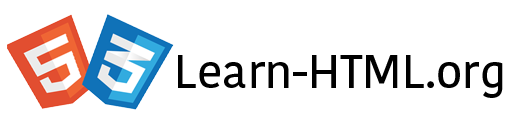
<style>
.page{position:relative;width:512px;height:124px;background:#ffffff}
.page>*{position:absolute;margin:0}
.t1{font:46px "KohinoorDevanagari-Medium";color:#000000}
</style>
<div class="page">
<p class="t1" style="left:178px;top:55px;width:325px;height:43px">Learn-HTML.org</p>
</div>
